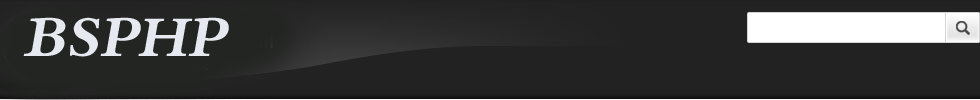
<style>
.page{position:relative;width:980px;height:100px;background:#222222}
.page>*{position:absolute;margin:0}
.t1{font:60px "2.0-";color:#e6eaf0;font-style:italic}
</style>
<div class="page">
<p class="t1" style="left:23px;top:17px;width:206px;height:40px">BSPHP</p>
</div>
